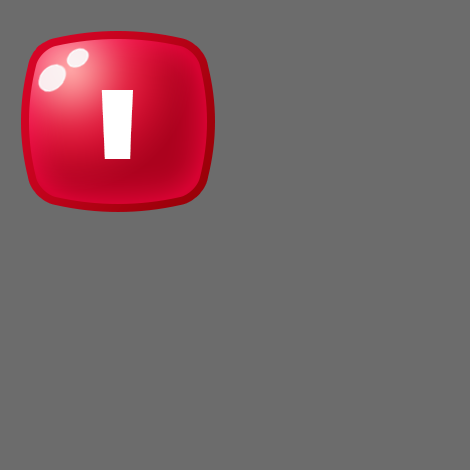
<style>
.page{position:relative;width:470px;height:470px;background:#6c6c6c}
.page>*{position:absolute;margin:0}
.t1{font:91.8px "ShowcardGothic-Reg";color:#ffffff}
</style>
<div class="page">
<p class="t1" style="left:101px;top:90px;width:32px;height:69px">I</p>
</div>
